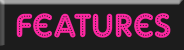
<style>
.page{position:relative;width:184px;height:50px;background:#1c1c1c}
.page>*{position:absolute;margin:0}
.t1{font:33.3px "AdamGorry-Lights";color:#fd27a1}
</style>
<div class="page">
<p class="t1" style="left:16px;top:13px;width:155px;height:25px">Features</p>
</div>
